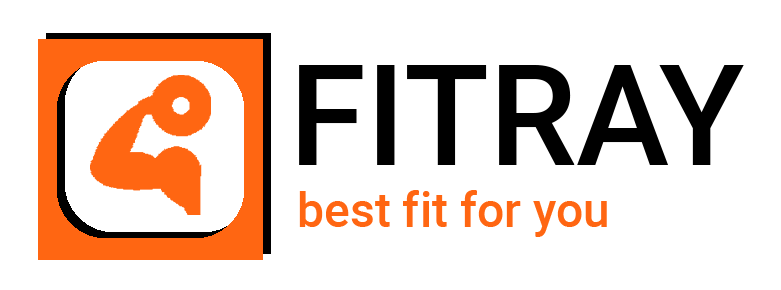
<style>
.page{position:relative;width:781px;height:290px;background:#ffffff}
.page>*{position:absolute;margin:0}
.t1{font:140px "Roboto-Medium";color:#000000}
.t2{font:48px "Roboto-Medium";color:#ff6612}
</style>
<div class="page">
<p class="t1" style="left:299px;top:65px;width:445px;height:100px">FITRAY</p>
<p class="t2" style="left:299px;top:190px;width:308px;height:47px">best fit for you</p>
</div>
